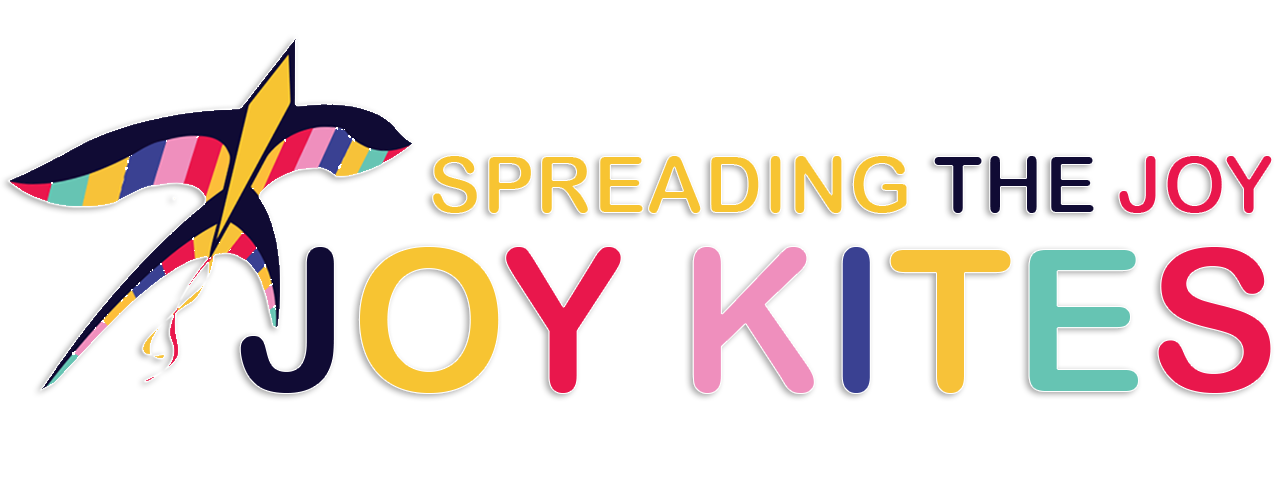
<style>
.page{position:relative;width:1279px;height:504px;background:#ffffff}
.page>*{position:absolute;margin:0}
.t1{font:80.2px "ArialRoundedMTBold";color:#f7c432}
.t2{font:80.2px "ArialRoundedMTBold";color:#100b34}
.t3{font:80.2px "ArialRoundedMTBold";color:#e9174c}
.t4{font:200.4px "ArialRoundedMTBold";color:#100b34}
.t5{font:200.4px "ArialRoundedMTBold";color:#f7c432}
.t6{font:200.4px "ArialRoundedMTBold";color:#e9174c}
.t7{font:200.4px "ArialRoundedMTBold";color:#ef8fbd}
.t8{font:200.4px "ArialRoundedMTBold";color:#3a4192}
.t9{font:200.4px "ArialRoundedMTBold";color:#f7c239}
.t10{font:200.4px "ArialRoundedMTBold";color:#66c4b3}
</style>
<div class="page">
<p class="t1" style="left:432px;top:155px;width:841px;height:59px">SPREADING <span class="t2">THE </span><span class="t3">JOY</span></p>
<p class="t4" style="left:239px;top:246px;width:1033px;height:148px">J<span class="t5">O</span><span class="t6">Y </span><span class="t7">K</span><span class="t8">I</span><span class="t9">T</span><span class="t10">E</span><span class="t6">S</span></p>
</div>
